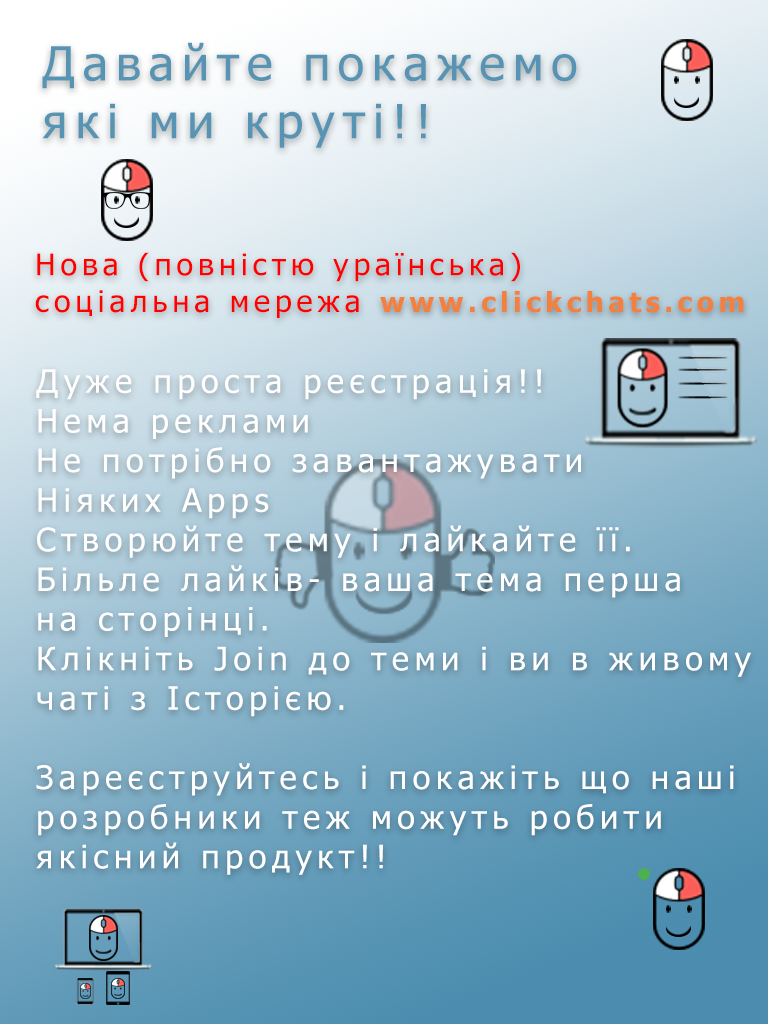
<style>
.page{position:relative;width:768px;height:1024px}
.page>*{position:absolute;margin:0}
.t1{font:47.3px "Tahoma";letter-spacing:0.16em;color:#5794b4}
.t2{font:29.9px "Tahoma";letter-spacing:0.16em;color:#ff0000}
.t3{font:27.4px "Tahoma-Bold";letter-spacing:0.16em;color:#f48040}
.t4{font:32.4px "Tahoma";letter-spacing:0.16em;color:#ffffff}
</style>
<div class="page">
<p class="t1" style="left:42px;top:42px;width:535px;height:106px">Давайте покажемо<br>які ми круті!!</p>
<p class="t2" style="left:35px;top:252px;width:709px;height:66px">Нова (повністю ураїнська)<br>соціальна мережа <span class="t3">www.clickchats.com</span></p>
<p class="t4" style="left:36px;top:369px;width:715px;height:506px">Дуже проста реєстрація!! <br>Нема реклами<br>Не потрібно завантажувати <br>Ніяких Apps<br>Створюйте тему і лайкайте її.<br>Більле лайків- ваша тема перша<br>на сторінці.<br>Клікніть Join до теми і ви в живому<br>чаті з Історією.<br><br>Зареєструйтесь і покажіть що наші<br>розробники теж можуть робити <br>якісний продукт!!</p>
</div>
